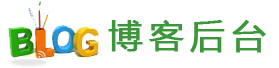
<style>
.page{position:relative;width:279px;height:68px;background:#ffffff}
.page>*{position:absolute;margin:0}
.t1{font:34px "MicrosoftYaHei";letter-spacing:0.18em;color:#3c973a;font-weight:bold}
</style>
<div class="page">
<p class="t1" style="left:108px;top:20px;width:158px;height:33px">博客后台</p>
</div>
